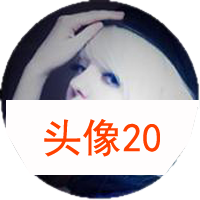
<style>
.page{position:relative;width:200px;height:200px;background:#fffdfd}
.page>*{position:absolute;margin:0}
.t1{font:40px "SimHei";color:#ff4000}
</style>
<div class="page">
<p class="t1" style="left:44px;top:119px;width:116px;height:38px">头像20</p>
</div>
